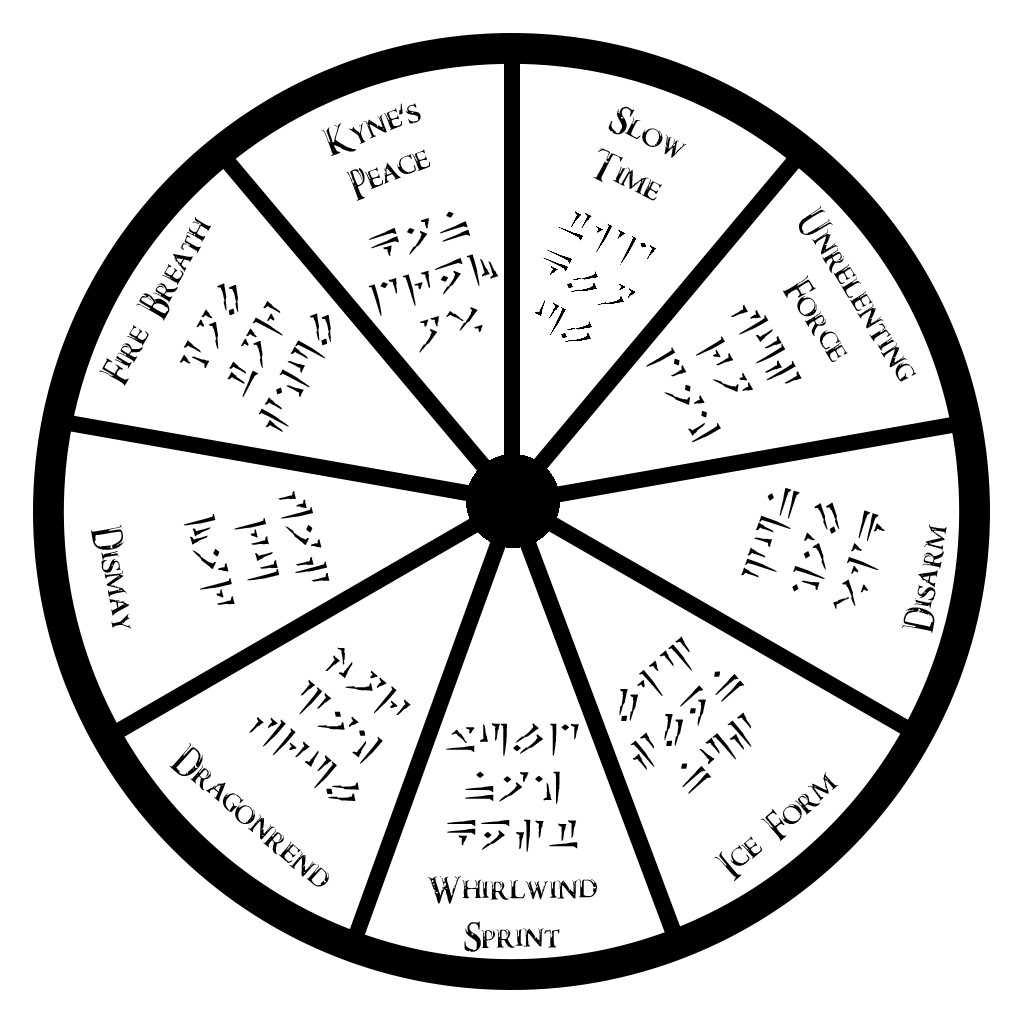
<style>
.page{position:relative;width:1024px;height:1024px;background:#ffffff}
.page>*{position:absolute;margin:0}
.t1{font:40px "DarksSkyrimFont";color:#000000}
.t2{font:40px "Dragonscript-Regular";color:#000000}
.t3{font:40.1px "Dragonscript-Regular";color:#000000}
.t4{font:40.1px "DarksSkyrimFont";color:#000000}
</style>
<div class="page">
<p class="t1" style="left:321px;top:103px;width:109px;height:98px;text-align:center;rotate:-21deg">Kyne's<br>Peace</p>
<p class="t1" style="left:592px;top:106px;width:95px;height:95px;text-align:center;rotate:27deg">Slow<br>Time</p>
<p class="t1" style="left:782px;top:205px;width:135px;height:177px;text-align:center;rotate:59deg">Unrelenting<br>Force</p>
<p class="t1" style="left:99px;top:216px;width:113px;height:170px;rotate:-60deg">Fire Breath</p>
<p class="t2" style="left:368px;top:211px;width:131px;height:142px;text-align:center;rotate:-17deg">kan<br>drem<br>ov</p>
<p class="t3" style="left:179px;top:283px;width:152px;height:149px;text-align:center;rotate:-62deg">yol<br>tor<br>shul</p>
<p class="t2" style="left:646px;top:304px;width:156px;height:139px;text-align:center;rotate:59deg">Fus<br>Ro<br>Dah</p>
<p class="t3" style="left:183px;top:491px;width:147px;height:114px;text-align:center;rotate:76deg">fas<br>ru<br>mar</p>
<p class="t3" style="left:741px;top:488px;width:144px;height:122px;text-align:center;rotate:-72deg">Zun<br>hal<br>vik</p>
<p class="t1" style="left:91px;top:524px;width:41px;height:105px;rotate:80deg">Dismay</p>
<p class="t4" style="left:901px;top:524px;width:46px;height:110px;rotate:-79deg">Disarm</p>
<p class="t3" style="left:619px;top:636px;width:133px;height:158px;text-align:center;rotate:-41deg">Liz<br>Slen<br>Nus</p>
<p class="t3" style="left:249px;top:647px;width:162px;height:154px;text-align:center;rotate:39deg">jor<br>zah<br>frul</p>
<p class="t2" style="left:446px;top:723px;width:133px;height:129px;text-align:center">wuld<br>nah<br>kest</p>
<p class="t4" style="left:169px;top:742px;width:160px;height:145px;rotate:41deg">Dragonrend</p>
<p class="t1" style="left:714px;top:772px;width:124px;height:110px;rotate:-40deg">Ice Form</p>
<p class="t1" style="left:427px;top:876px;width:170px;height:76px;text-align:center">Whirlwind<br>Sprint</p>
</div>
